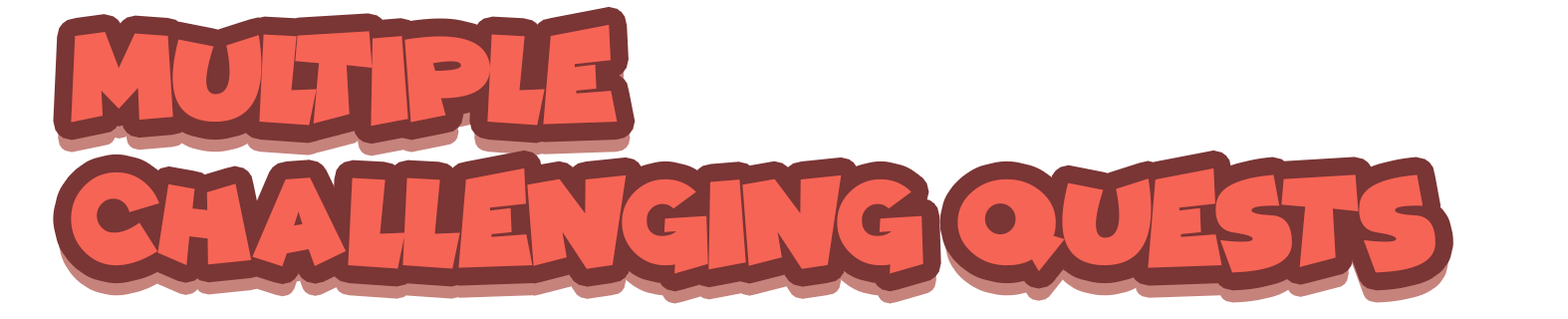
<style>
.page{position:relative;width:1568px;height:319px;background:#ffffff}
.page>*{position:absolute;margin:0}
.t1{font:119.5px "ComicKings";letter-spacing:-0.01em;color:#f66455}
</style>
<div class="page">
<p class="t1" style="left:71px;top:24px;width:1365px;height:250px">Multiple <br>challenging quests</p>
</div>
